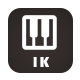
<style>
.page{position:relative;width:80px;height:80px;background:#ffffff}
.page>*{position:absolute;margin:0}
.t1{font:15px "Bauhaus93";color:#ffffff}
</style>
<div class="page">
<p class="t1" style="left:33px;top:57px;width:16px;height:10px">1K</p>
</div>
